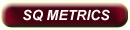
<style>
.page{position:relative;width:130px;height:30px}
.page>*{position:absolute;margin:0}
.t1{font:14px "Arial-BoldItalicMT";color:#fcfbf9}
</style>
<div class="page">
<p class="t1" style="left:23px;top:9px;width:87px;height:13px">SQ METRICS</p>
</div>
